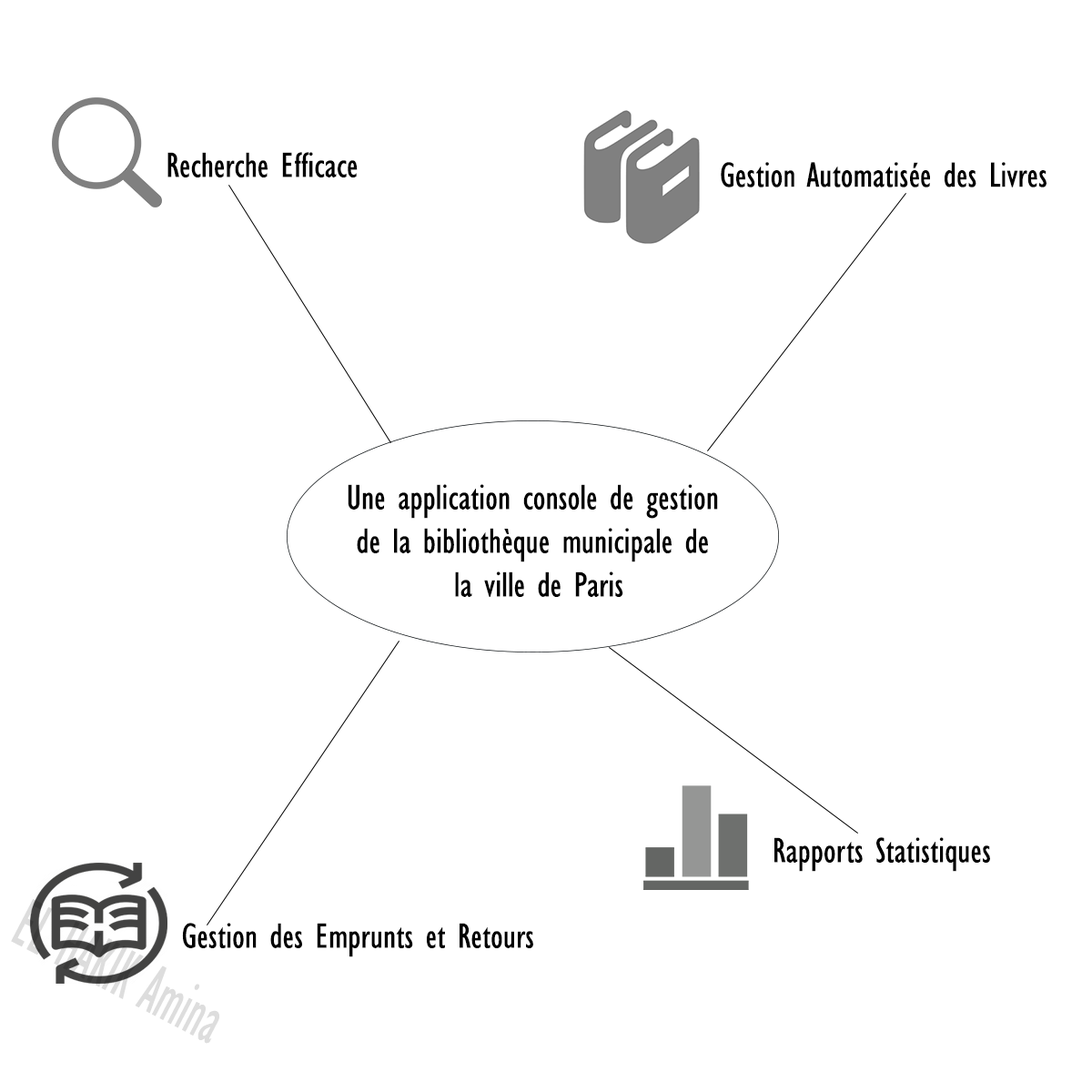
<style>
.page{position:relative;width:1092px;height:1092px;background:#ffffff}
.page>*{position:absolute;margin:0}
.t1{font:36.4px "GillSansMT-Condensed";color:#000000}
.t2{font:36.3px "GillSansMT-Condensed";color:#000000}
</style>
<div class="page">
<p class="t1" style="left:167px;top:152px;width:191px;height:25px">Recherche Efficace</p>
<p class="t2" style="left:721px;top:162px;width:325px;height:25px">Gestion Automatisée des Livres</p>
<p class="t1" style="left:348px;top:484px;width:370px;height:113px;text-align:center">Une application console de gestion <br>de la bibliothèque municipale de <br>la ville de Paris</p>
<p class="t1" style="left:774px;top:837px;width:216px;height:35px">Rapports Statistiques</p>
<p class="t1" style="left:182px;top:923px;width:351px;height:34px">Gestion des Emprunts et Retours</p>
</div>
